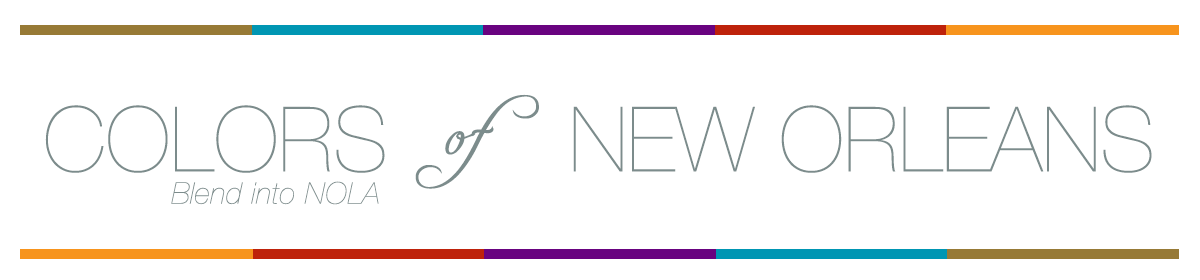
<style>
.page{position:relative;width:1200px;height:280px;background:#ffffff}
.page>*{position:absolute;margin:0}
.t1{font:66px "FreebooterScript";color:#7c8c8c}
.t2{font:90px "HelveticaNeue-UltraLight";color:#7c8c8c}
.t3{font:30px "HelveticaNeue-UltraLightItalic";letter-spacing:0.02em;color:#7c8c8c}
</style>
<div class="page">
<p class="t1" style="left:415px;top:94px;width:124px;height:95px">of</p>
<p class="t2" style="left:45px;top:105px;width:340px;height:68px">COLORS</p>
<p class="t2" style="left:573px;top:105px;width:579px;height:68px">NEW ORLEANS</p>
<p class="t3" style="left:171px;top:181px;width:208px;height:24px">Blend into NOLA</p>
</div>
